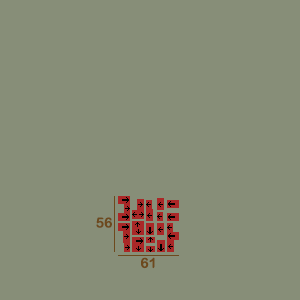
<style>
.page{position:relative;width:300px;height:300px;background:#878e78}
.page>*{position:absolute;margin:0}
.t1{font:14px "ArialRoundedMTBold";color:#6d491d}
</style>
<div class="page">
<p class="t1" style="left:96px;top:217px;width:16px;height:11px">56</p>
<p class="t1" style="left:141px;top:257px;width:14px;height:12px">61</p>
</div>
